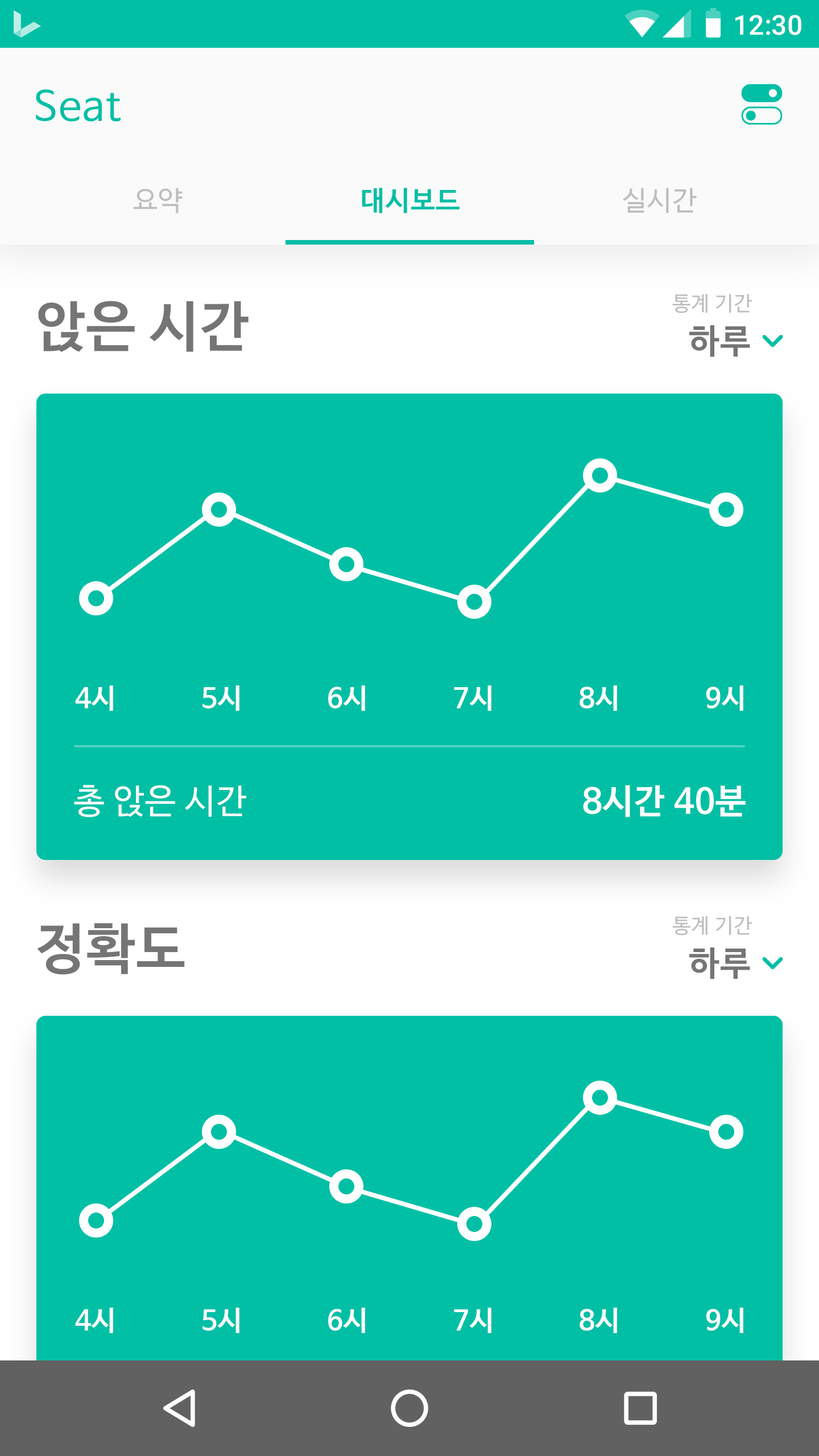
<style>
.page{position:relative;width:819px;height:1456px;background:#00bfa5}
.page>*{position:absolute;margin:0}
.t1{font:27.3px "Roboto-Medium";color:#ffffff}
.t2{font:40.9px "NanumBarunGothic";letter-spacing:0.025em;color:#00bfa5}
.t3{font:27.3px "NanumBarunGothic";letter-spacing:0.025em;color:#bdbdbd}
.t4{font:27.3px "NanumBarunGothicBold";letter-spacing:0.025em;color:#00bfa5}
.t5{font:54.6px "NanumBarunGothicBold";letter-spacing:0.025em;color:#757575}
.t6{font:20.5px "NanumBarunGothic";letter-spacing:0.025em;color:#bdbdbd}
.t7{font:34.1px "NanumBarunGothicBold";letter-spacing:0.025em;color:#757575}
.t8{font:27.3px "NanumBarunGothicBold";letter-spacing:0.025em;color:#ffffff}
.t9{font:34.1px "NanumBarunGothic";letter-spacing:0.025em;color:#ffffff}
.t10{font:34.1px "NanumBarunGothicBold";letter-spacing:0.025em;color:#ffffff}
</style>
<div class="page">
<p class="t1" style="left:735px;top:15px;width:66px;height:20px">12:30</p>
<p class="t2" style="left:36px;top:89px;width:85px;height:33px">Seat</p>
<p class="t3" style="left:133px;top:188px;width:50px;height:25px">요약</p>
<p class="t4" style="left:362px;top:188px;width:98px;height:25px">대시보드</p>
<p class="t3" style="left:623px;top:188px;width:74px;height:25px">실시간</p>
<p class="t5" style="left:38px;top:301px;width:211px;height:51px">앉은 시간</p>
<p class="t6" style="left:672px;top:294px;width:80px;height:19px">통계 기간</p>
<p class="t7" style="left:689px;top:325px;width:61px;height:32px">하루</p>
<p class="t8" style="left:75px;top:685px;width:38px;height:26px">4시</p>
<p class="t8" style="left:202px;top:685px;width:37px;height:26px">5시</p>
<p class="t8" style="left:328px;top:685px;width:37px;height:26px">6시</p>
<p class="t8" style="left:454px;top:685px;width:37px;height:26px">7시</p>
<p class="t8" style="left:580px;top:685px;width:37px;height:26px">8시</p>
<p class="t8" style="left:706px;top:685px;width:37px;height:26px">9시</p>
<p class="t9" style="left:74px;top:785px;width:172px;height:32px">총 앉은 시간</p>
<p class="t10" style="left:583px;top:785px;width:163px;height:32px">8시간 40분</p>
<p class="t6" style="left:672px;top:916px;width:80px;height:20px">통계 기간</p>
<p class="t5" style="left:37px;top:923px;width:148px;height:52px">정확도</p>
<p class="t7" style="left:689px;top:947px;width:61px;height:32px">하루</p>
<p class="t8" style="left:75px;top:1308px;width:38px;height:25px">4시</p>
<p class="t8" style="left:202px;top:1308px;width:37px;height:25px">5시</p>
<p class="t8" style="left:328px;top:1308px;width:37px;height:25px">6시</p>
<p class="t8" style="left:454px;top:1308px;width:37px;height:25px">7시</p>
<p class="t8" style="left:580px;top:1308px;width:37px;height:25px">8시</p>
<p class="t8" style="left:706px;top:1308px;width:37px;height:25px">9시</p>
</div>
